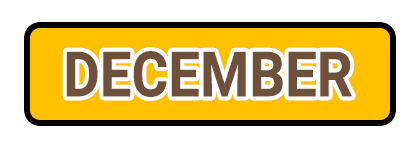
<style>
.page{position:relative;width:420px;height:148px;background:#ffffff}
.page>*{position:absolute;margin:0}
.t1{font:62.5px "Roboto-Bold";color:#6f503b;scale:0.9 1}
</style>
<div class="page">
<p class="t1" style="left:66px;top:51px;width:286px;height:46px">DECEMBER</p>
</div>
